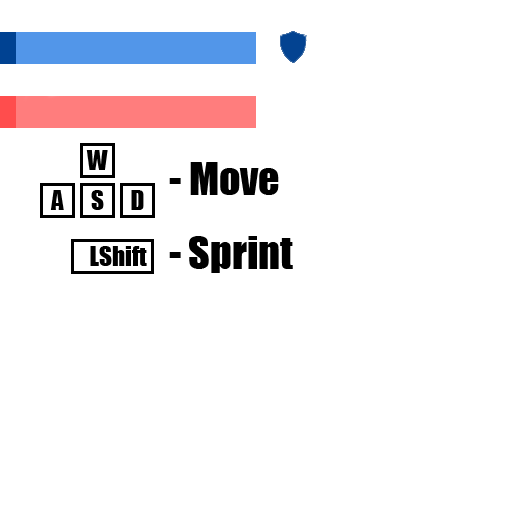
<style>
.page{position:relative;width:512px;height:512px;background:#ffffff}
.page>*{position:absolute;margin:0}
.t1{font:25px "Impact";color:#000000}
.t2{font:41.7px "Impact";color:#000000}
</style>
<div class="page">
<p class="t1" style="left:86px;top:150px;width:22px;height:20px">W</p>
<p class="t2" style="left:169px;top:162px;width:110px;height:33px">- Move</p>
<p class="t1" style="left:50px;top:190px;width:14px;height:20px">A</p>
<p class="t1" style="left:91px;top:190px;width:13px;height:20px">S</p>
<p class="t1" style="left:131px;top:190px;width:13px;height:20px">D</p>
<p class="t1" style="left:90px;top:246px;width:57px;height:20px">LShift</p>
<p class="t2" style="left:169px;top:236px;width:124px;height:37px">- Sprint</p>
</div>
